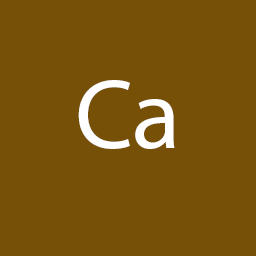
<style>
.page{position:relative;width:256px;height:256px;background:#765007}
.page>*{position:absolute;margin:0}
.t1{font:100px "MyriadPro-Regular";color:#ffffff}
</style>
<div class="page">
<p class="t1" style="left:78px;top:80px;width:97px;height:69px">Ca</p>
</div>
